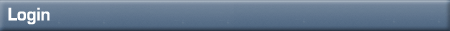
<style>
.page{position:relative;width:450px;height:31px}
.page>*{position:absolute;margin:0}
.t1{font:32px "EurostileBold";color:#ffffff}
</style>
<div class="page">
<p class="t1" style="left:8px;top:7px;width:42px;height:18px">Login</p>
</div>
